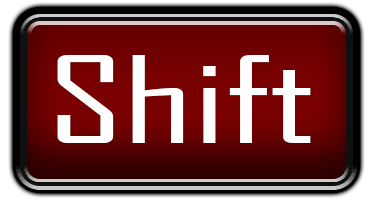
<style>
.page{position:relative;width:374px;height:200px}
.page>*{position:absolute;margin:0}
.t1{font:114.9px "AgencyFB-Reg";color:#ffffff;scale:1.6 1}
</style>
<div class="page">
<p class="t1" style="left:57px;top:55px;width:254px;height:88px">Shift</p>
</div>
